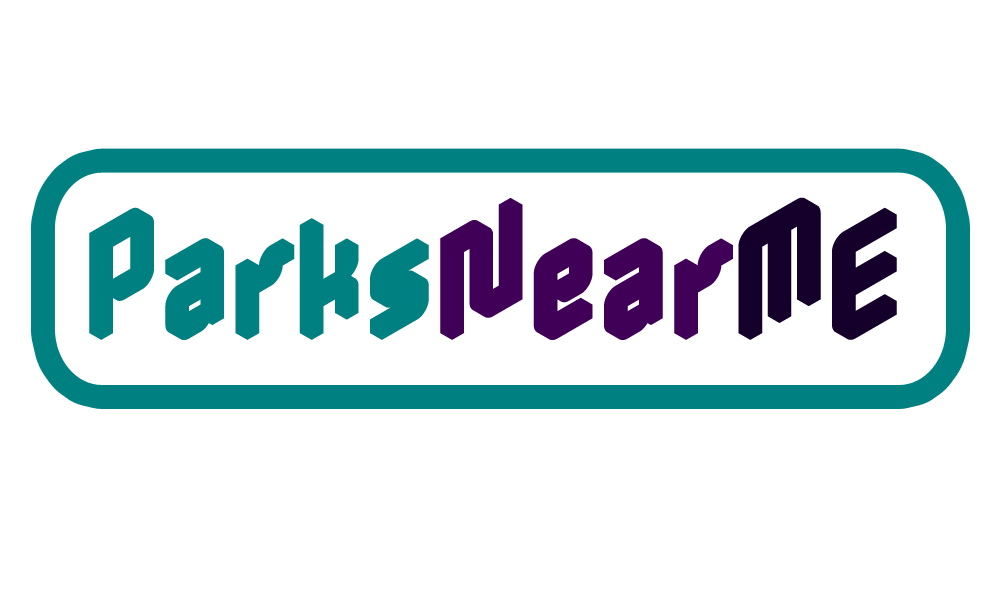
<style>
.page{position:relative;width:1000px;height:600px;background:#ffffff}
.page>*{position:absolute;margin:0}
.t1{font:135px "Nabla-Regular";color:#008080}
.t2{font:135px "Nabla-Regular";color:#400058}
.t3{font:135px "Nabla-Regular";color:#14002b}
</style>
<div class="page">
<p class="t1" style="left:89px;top:197px;width:808px;height:143px">Parks<span class="t2">Near</span><span class="t3">ME</span></p>
</div>
